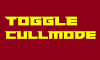
<style>
.page{position:relative;width:100px;height:60px;background:#8d0018}
.page>*{position:absolute;margin:0}
.t1{font:11.2px "PaladinsStraight";color:#fcff00}
.t2{font:12.5px "PaladinsStraight";color:#fcff00}
</style>
<div class="page">
<p class="t1" style="left:5px;top:16px;width:91px;height:23px"><span class="t2">Toggle </span>Cullmode</p>
</div>
